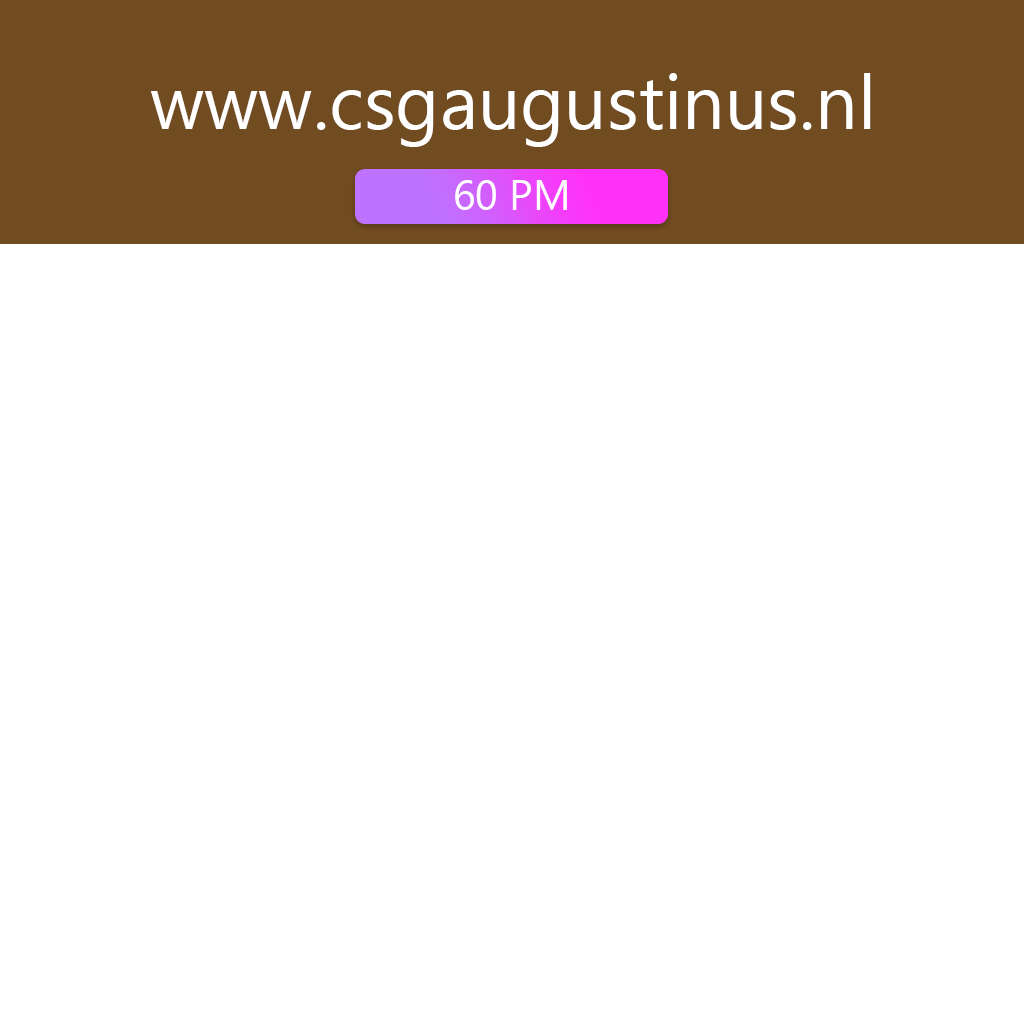
<style>
.page{position:relative;width:1024px;height:1024px;background:#ffffff}
.page>*{position:absolute;margin:0}
.t1{font:75px "MyanmarText";color:#ffffff}
.t2{font:41.7px "MyanmarText";color:#fffefe}
</style>
<div class="page">
<p class="t1" style="left:151px;top:73px;width:720px;height:74px">www.csgaugustinus.nl</p>
<p class="t2" style="left:455px;top:180px;width:112px;height:30px">60 PM</p>
</div>
